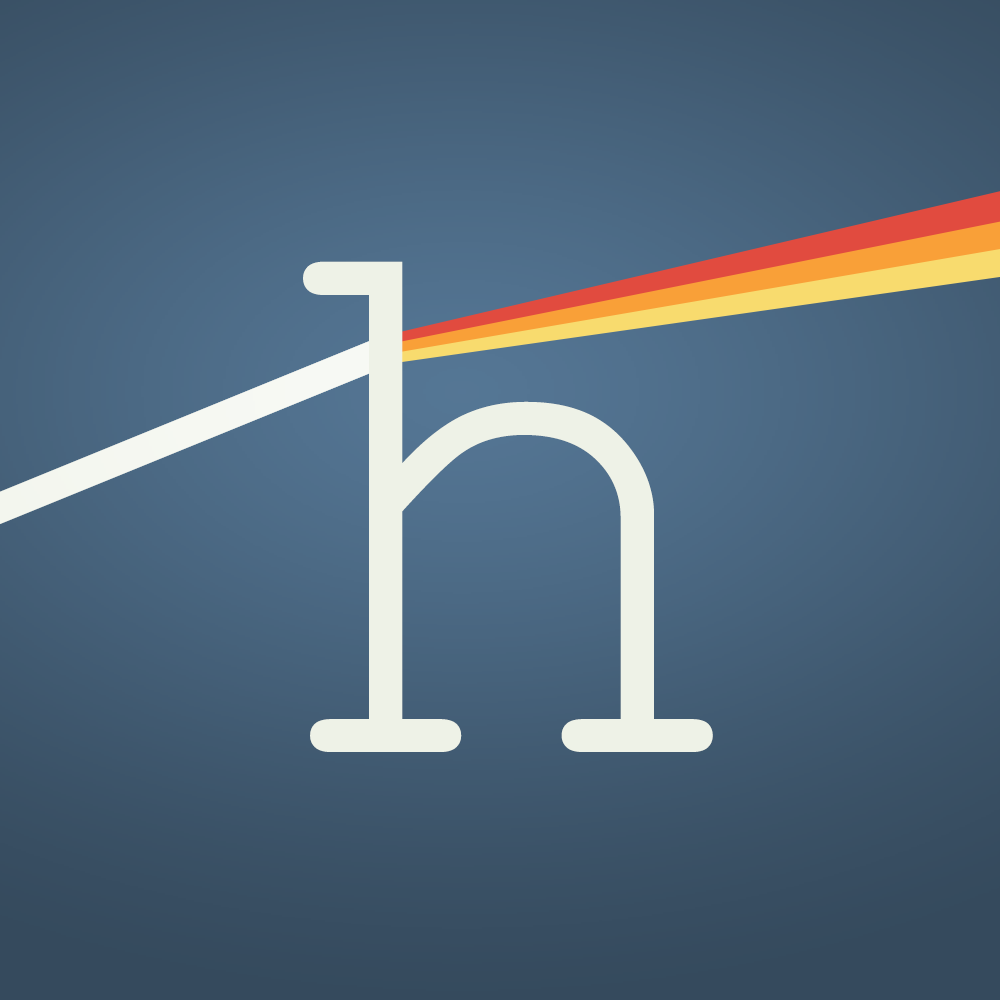
<style>
.page{position:relative;width:1000px;height:1000px}
.page>*{position:absolute;margin:0}
.t1{font:800px "CourierNewPSMT";letter-spacing:0.003em;color:#eef2e7}
</style>
<div class="page">
<p class="t1" style="left:303px;top:261px;width:410px;height:491px">h</p>
</div>
